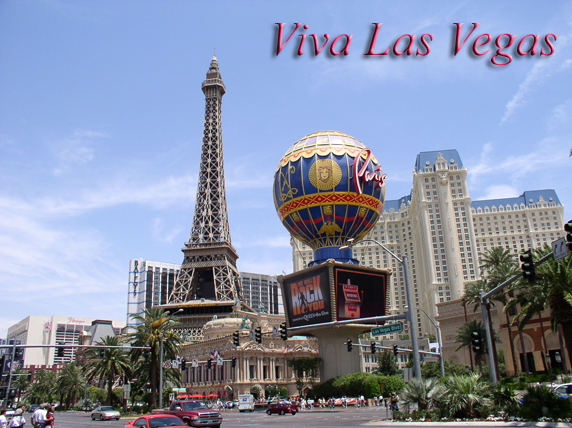
<style>
.page{position:relative;width:572px;height:428px}
.page>*{position:absolute;margin:0}
.t1{font:48px "TimesNewRomanPS-ItalicMT"}
</style>
<div class="page">
<p class="t1" style="left:275px;top:23px;width:283px;height:43px">Viva Las Vegas</p>
</div>
